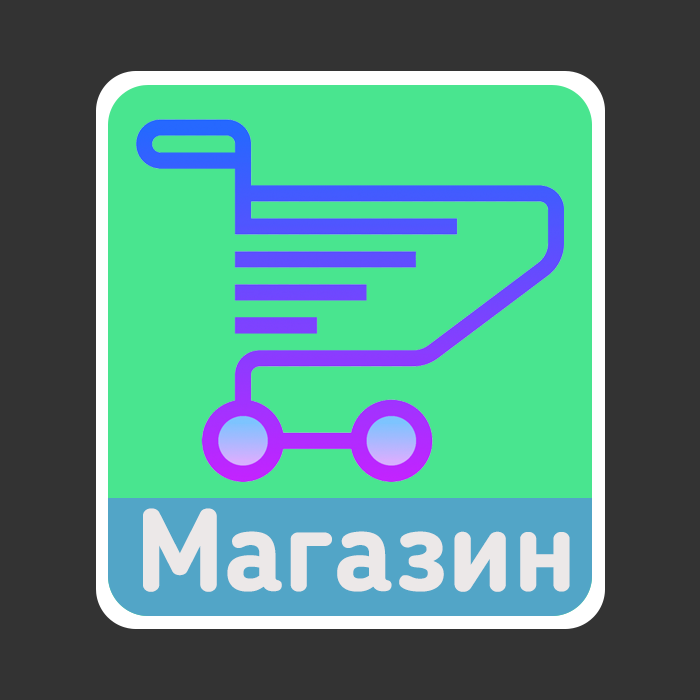
<style>
.page{position:relative;width:700px;height:700px;background:#333333}
.page>*{position:absolute;margin:0}
.t1{font:115px "BloggerSans-Bold";color:#ece8e8}
</style>
<div class="page">
<p class="t1" style="left:143px;top:508px;width:427px;height:84px">Магазин</p>
</div>
